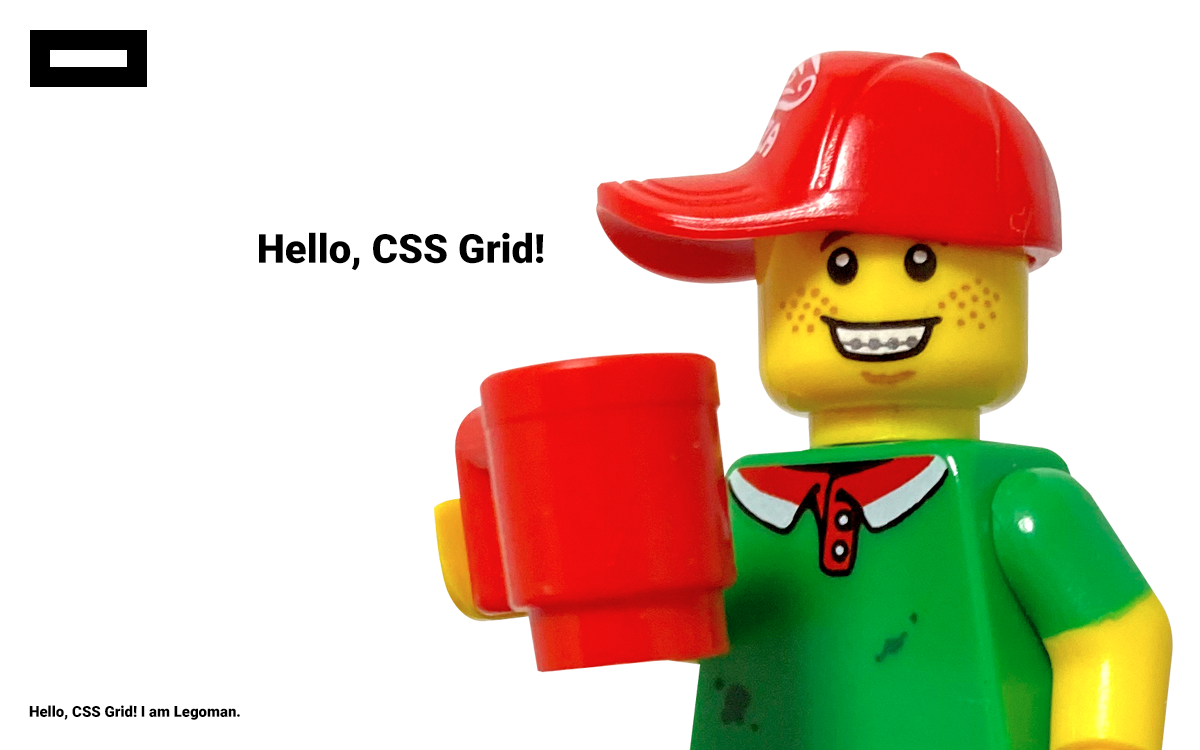
<style>
.page{position:relative;width:1200px;height:750px;background:#ffffff}
.page>*{position:absolute;margin:0}
.t1{font:40px "Roboto-Black";color:#000000}
.t2{font:15px "Roboto-Black";color:#000000}
</style>
<div class="page">
<p class="t1" style="left:259px;top:232px;width:285px;height:39px">Hello, CSS Grid!</p>
<p class="t2" style="left:29px;top:705px;width:211px;height:15px">Hello, CSS Grid! I am Legoman.</p>
</div>
